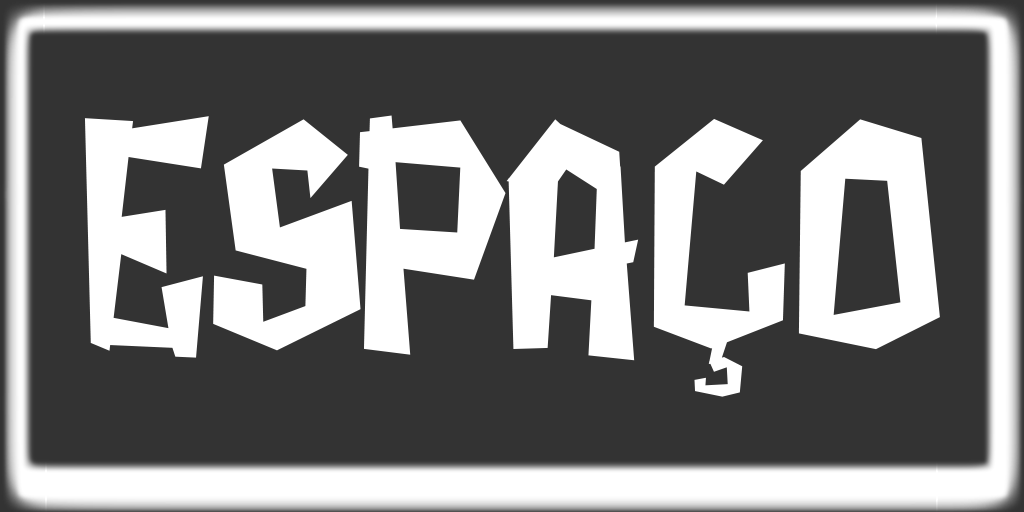
<style>
.page{position:relative;width:1024px;height:512px;background:#333333}
.page>*{position:absolute;margin:0}
.t1{font:270.8px "ZombieTai";color:#ffffff}
</style>
<div class="page">
<p class="t1" style="left:84px;top:115px;width:856px;height:282px">ESPAÇO</p>
</div>
